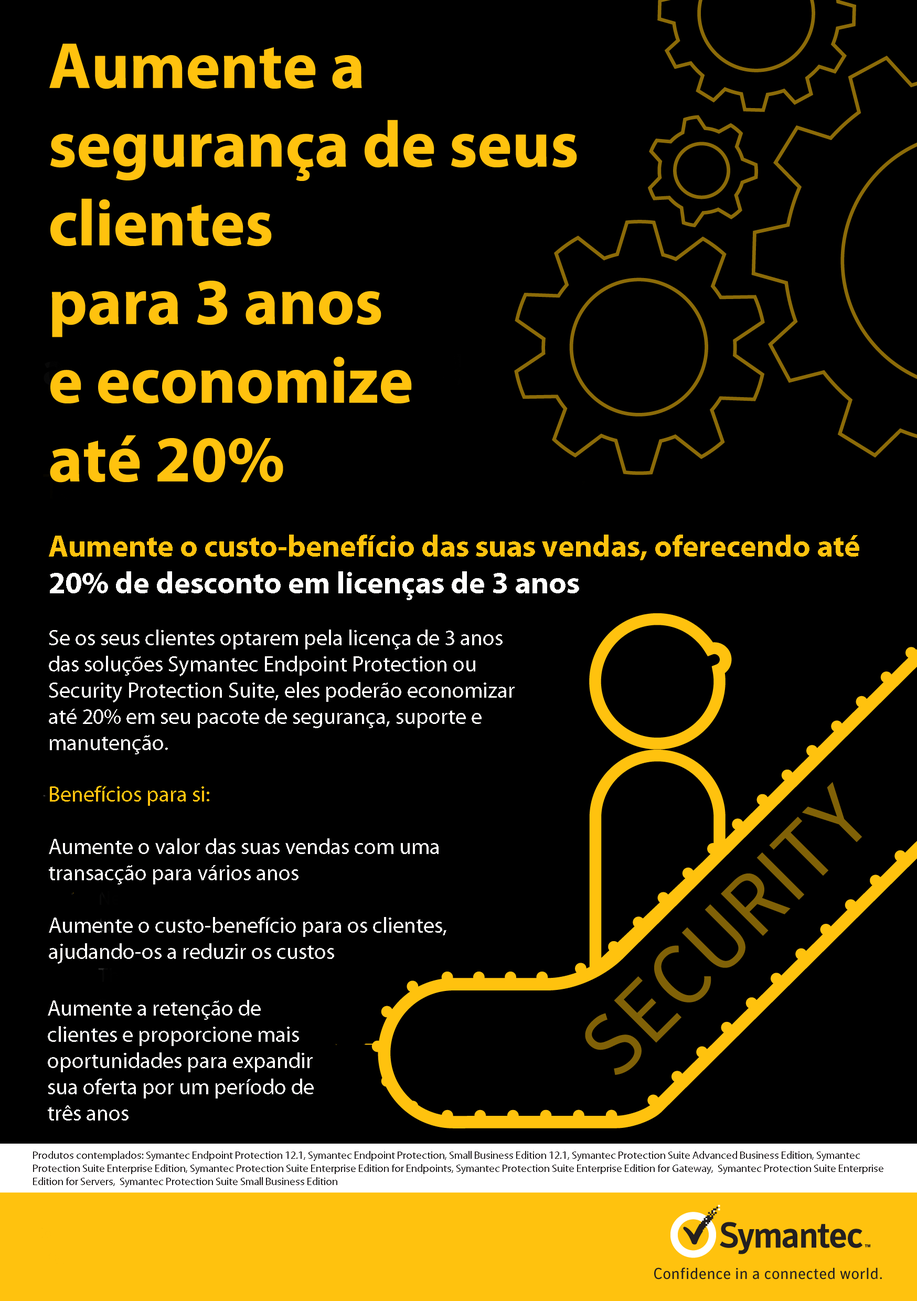
<style>
.page{position:relative;width:917px;height:1301px;background:#000000}
.page>*{position:absolute;margin:0}
.t1{font:65.6px/78.7px "MyriadPro-Bold";color:#ffc20e}
.t2{font:30.6px "MyriadPro-Bold";color:#ffc20e}
.t3{font:30.6px "MyriadPro-Bold";color:#fffffe}
.t4{font:21.9px "MyriadPro-Regular";color:#fefdfc}
.t5{font:21.9px "MyriadPro-Regular";color:#ffc20e}
.t6{font:10.9px "MyriadPro-Regular";color:#231f20}
</style>
<div class="page">
<p class="t1" style="left:49px;top:44px;width:528px;height:439px">Aumente a segurança de seus clientes <br>para 3 anos <br>e economize <br>até 20%</p>
<p class="t2" style="left:49px;top:534px;width:810px;height:66px">Aumente o custo-benefício das suas vendas, oferecendo até <span class="t3">20% de desconto em licenças de 3 anos</span></p>
<p class="t4" style="left:49px;top:629px;width:466px;height:125px">Se os seus clientes optarem pela licença de 3 anos das soluções Symantec Endpoint Protection ou Security Protection Suite, eles poderão economizar até 20% em seu pacote de segurança, suporte e manutenção.</p>
<p class="t4" style="left:49px;top:786px;width:397px;height:177px"><span class="t5">Benefícios para si: <br></span>  <br>Aumente o valor das suas vendas com uma transacção para vários anos <br><br>Aumente o custo-benefício para os clientes, ajudando-os a reduzir os custos</p>
<p class="t4" style="left:48px;top:1000px;width:266px;height:120px">Aumente a retenção de clientes e proporcione mais oportunidades para expandir sua oferta por um período de três anos</p>
<p class="t6" style="left:33px;top:1151px;width:850px;height:36px">Produtos contemplados: Symantec Endpoint Protection 12.1, Symantec Endpoint Protection, Small Business Edition 12.1, Symantec Protection Suite Advanced Business Edition, Symantec Protection Suite Enterprise Edition, Symantec Protection Suite Enterprise Edition for Endpoints, Symantec Protection Suite Enterprise Edition for Gateway,  Symantec Protection Suite Enterprise Edition for Servers,  Symantec Protection Suite Small Business Edition</p>
</div>
